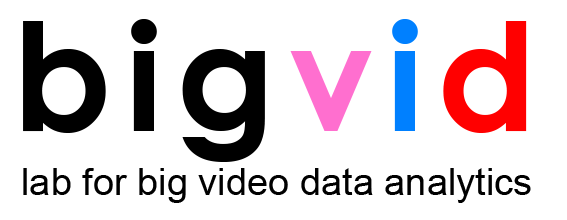
<style>
.page{position:relative;width:567px;height:220px;background:#ffffff}
.page>*{position:absolute;margin:0}
.t1{font:150px "CenturyGothic-Bold";color:#000000}
.t2{font:150px "CenturyGothic-Bold";color:#ff6fcf}
.t3{font:150px "CenturyGothic-Bold";color:#0080ff}
.t4{font:150px "CenturyGothic-Bold";color:#ff0000}
.t5{font:38px "ArialMT";color:#000000}
</style>
<div class="page">
<p class="t1" style="left:23px;top:19px;width:504px;height:143px">b i g <span class="t2">v </span><span class="t3">i </span><span class="t4">d</span></p>
<p class="t5" style="left:23px;top:168px;width:508px;height:35px">lab for big video data analytics</p>
</div>
